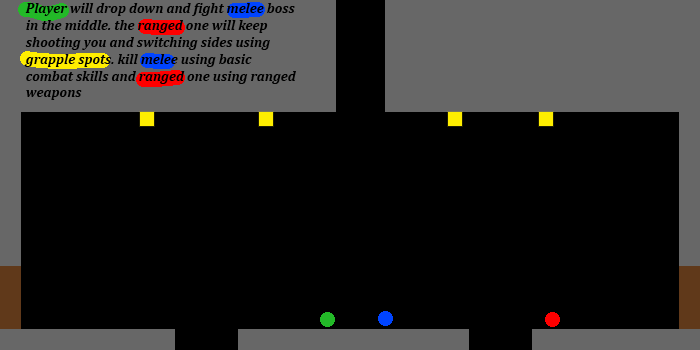
<style>
.page{position:relative;width:700px;height:350px;background:#000000}
.page>*{position:absolute;margin:0}
.t1{font:14px "Cambria-BoldItalic";color:#000000}
</style>
<div class="page">
<p class="t1" style="left:24px;top:3px;width:272px;height:97px">Player will drop down and fight melee boss in the middle. the ranged one will keep shooting you and switching sides using<br>grapple spots. kill melee using basic combat skills and ranged one using ranged <br>weapons</p>
</div>
